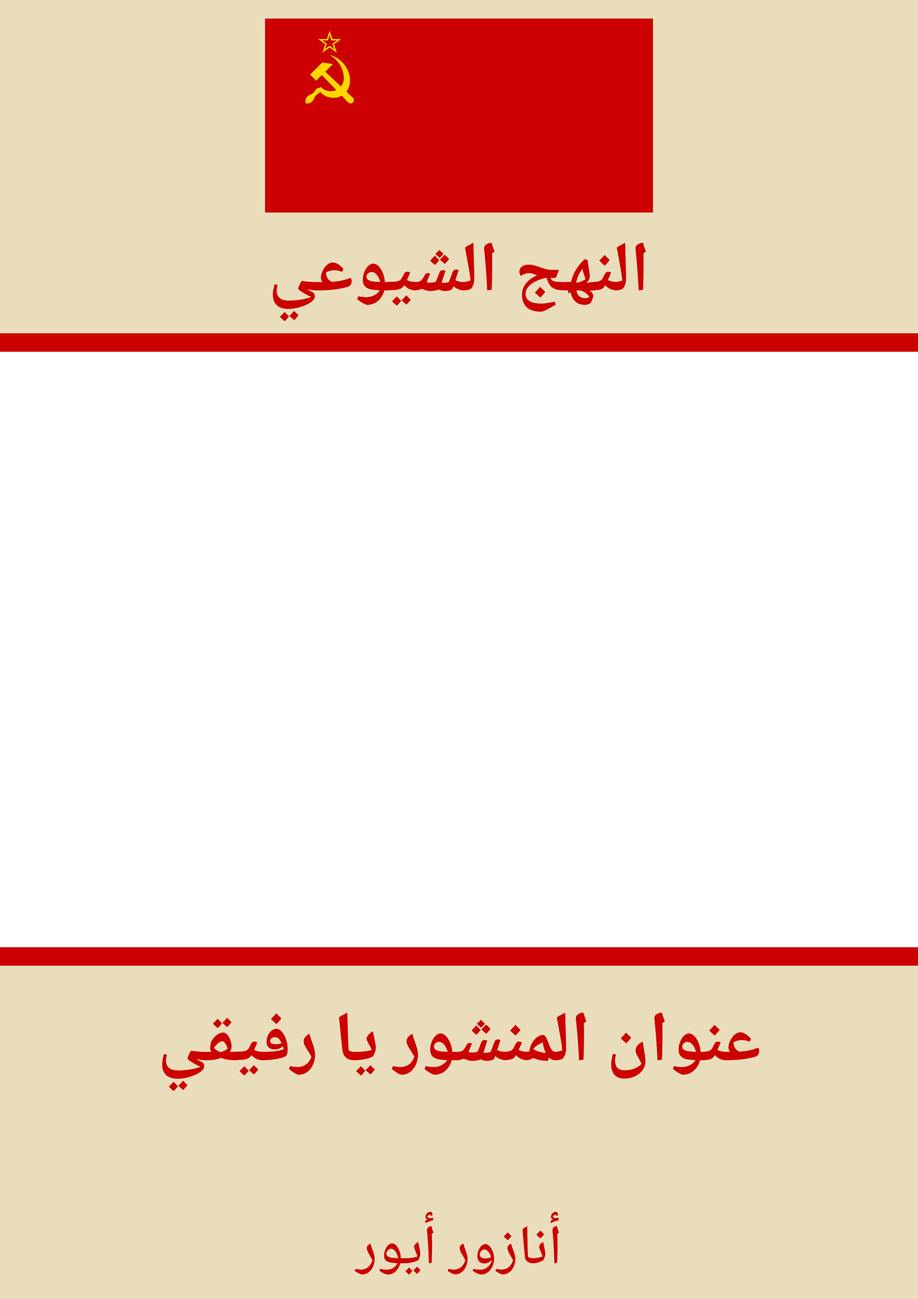
<style>
.page{position:relative;width:918px;height:1299px;background:#ffffff}
.page>*{position:absolute;margin:0}
.t1{font:71px "NotoNaskhArabic-Bold";color:#cc0000}
.t2{font:55.5px "NotoNaskhArabic-Medium";color:#cc0000}
</style>
<div class="page">
<p class="t1" style="left:273px;top:242px;width:373px;height:79px">النهج الشيوعي</p>
<p class="t1" style="left:162px;top:1012px;width:598px;height:79px">عنوان المنشور يا رفيقي</p>
<p class="t2" style="left:355px;top:1211px;width:204px;height:64px">أنازور أيور</p>
</div>
